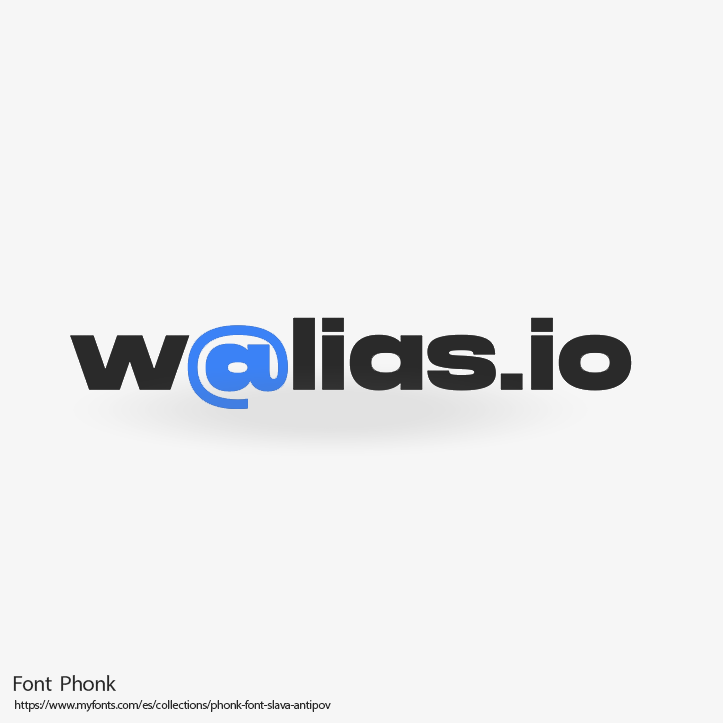
<style>
.page{position:relative;width:723px;height:723px;background:#f6f6f6}
.page>*{position:absolute;margin:0}
.t1{font:22px "MyriadPro-Regular";letter-spacing:-0.025em;color:#2a2a2a}
.t2{font:12px "MyriadPro-Regular";letter-spacing:-0.025em;color:#2a2a2a}
</style>
<div class="page">
<p class="t1" style="left:13px;top:675px;width:103px;height:16px">Font  Phonk</p>
<p class="t2" style="left:15px;top:700px;width:316px;height:12px">https://www.myfonts.com/es/collections/phonk-font-slava-antipov</p>
</div>
